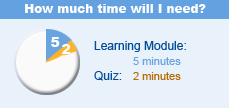
<style>
.page{position:relative;width:229px;height:108px;background:#e9f2fb}
.page>*{position:absolute;margin:0}
.t1{font:12px "Arial-Black";color:#ffffff}
.t2{font:14px "Arial-Black";color:#ffffff}
.t3{font:12px "ArialMT";color:#024d9b}
.t4{font:11px "ArialMT";color:#69a4e0}
.t5{font:11px "ArialMT";color:#b36d04}
</style>
<div class="page">
<p class="t1" style="left:25px;top:4px;width:181px;height:9px">How much time will I need?</p>
<p class="t2" style="left:51px;top:37px;width:9px;height:10px">5</p>
<p class="t3" style="left:94px;top:41px;width:92px;height:11px">Learning Module:</p>
<p class="t2" style="left:61px;top:44px;width:10px;height:10px">2</p>
<p class="t4" style="left:133px;top:57px;width:48px;height:8px">5 minutes</p>
<p class="t3" style="left:94px;top:71px;width:28px;height:10px">Quiz:</p>
<p class="t5" style="left:133px;top:72px;width:48px;height:8px">2 minutes</p>
</div>
